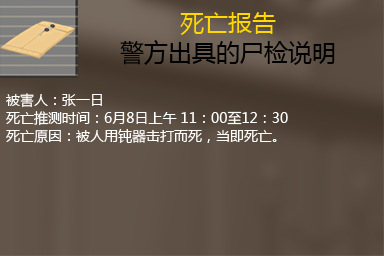
<style>
.page{position:relative;width:384px;height:256px}
.page>*{position:absolute;margin:0}
.t1{font:24px/30px "MicrosoftYaHei";color:#000000}
.t2{font:24px/30px "MicrosoftYaHei";color:#ffd800}
.t3{font:14px/18px "MicrosoftYaHei";color:#ffffff}
</style>
<div class="page">
<p class="t1" style="left:120px;top:12px;width:215px;height:53px;text-align:center"><span class="t2">死亡报告<br></span>警方出具的尸检说明</p>
<p class="t3" style="left:6px;top:93px;width:282px;height:50px">被害人：张一日<br>死亡推测时间：6月8日上午 11：00至12：30<br>死亡原因：被人用钝器击打而死，当即死亡。</p>
</div>
